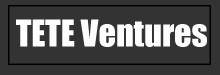
<style>
.page{position:relative;width:220px;height:75px;background:#333333}
.page>*{position:absolute;margin:0}
.t1{font:34px "Impact";color:#fefefe}
</style>
<div class="page">
<p class="t1" style="left:16px;top:19px;width:191px;height:28px">TETE Ventures</p>
</div>
